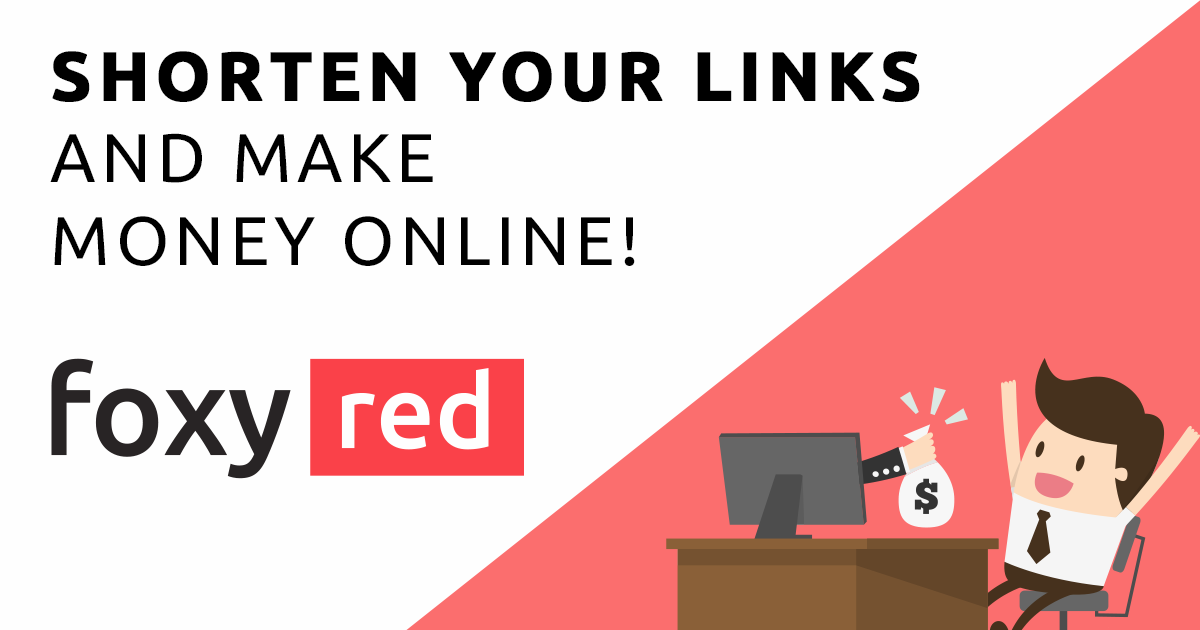
<style>
.page{position:relative;width:1200px;height:630px;background:#fefefe}
.page>*{position:absolute;margin:0}
.t1{font:68.8px "Ubuntu";letter-spacing:0.075em;color:#000000;text-transform:uppercase}
.t2{font:68.8px "Ubuntu-Bold";letter-spacing:0.075em;color:#000000;text-transform:uppercase;font-weight:bold}
</style>
<div class="page">
<p class="t1" style="left:50px;top:51px;width:870px;height:215px"><span class="t2">Shorten your links</span><br>And make<br>money online!</p>
</div>
